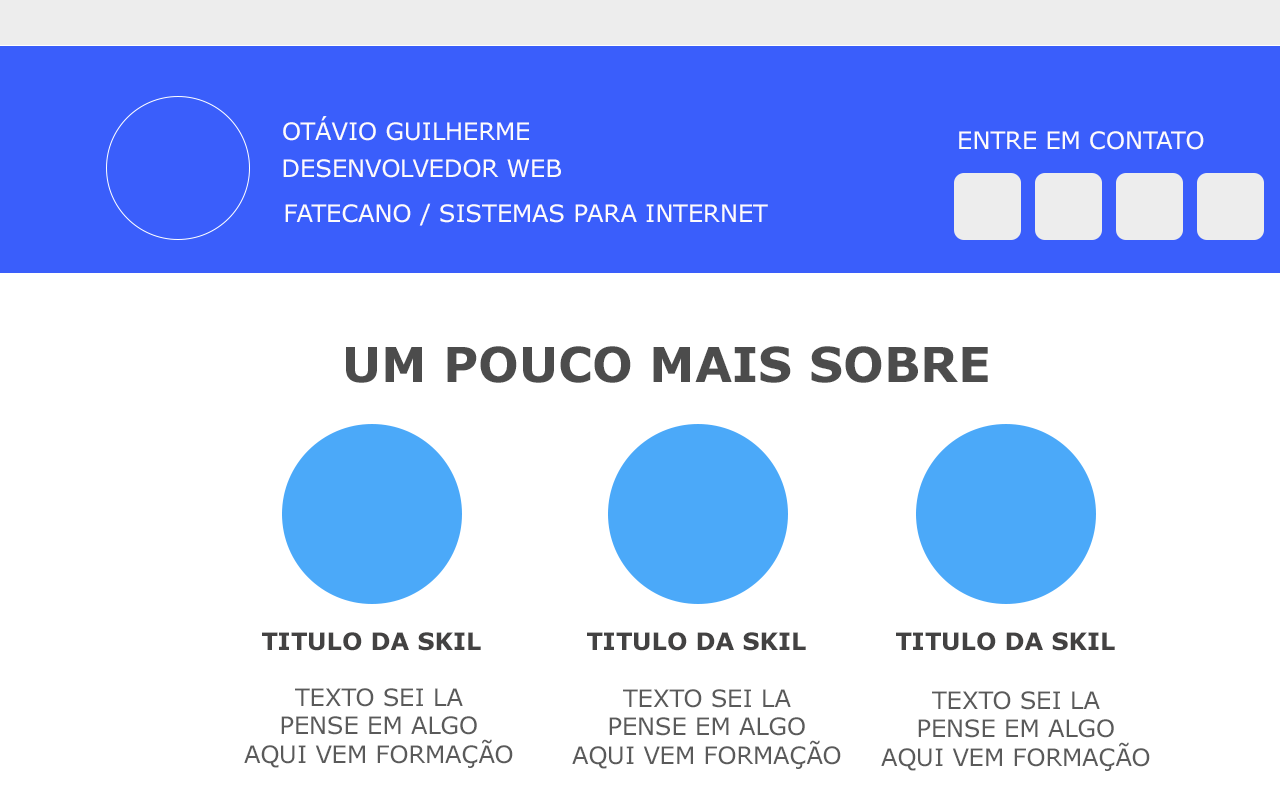
<style>
.page{position:relative;width:1280px;height:800px;background:#ffffff}
.page>*{position:absolute;margin:0}
.t1{font:24px "Verdana";color:#fdfbfb}
.t2{font:48px "Verdana-Bold";color:#4c4c4c}
.t3{font:24px "Verdana-Bold";color:#434242}
.t4{font:24px "Verdana";color:#5a5a5a}
</style>
<div class="page">
<p class="t1" style="left:283px;top:116px;width:246px;height:25px">OTÁVIO GUILHERME</p>
<p class="t1" style="left:959px;top:131px;width:245px;height:19px">ENTRE EM CONTATO</p>
<p class="t1" style="left:283px;top:159px;width:278px;height:19px">DESENVOLVEDOR WEB</p>
<p class="t1" style="left:285px;top:203px;width:483px;height:23px">FATECANO / SISTEMAS PARA INTERNET</p>
<p class="t2" style="left:346px;top:346px;width:642px;height:37px">UM POUCO MAIS SOBRE</p>
<p class="t3" style="left:262px;top:632px;width:219px;height:19px">TITULO DA SKIL</p>
<p class="t3" style="left:587px;top:632px;width:219px;height:19px">TITULO DA SKIL</p>
<p class="t3" style="left:896px;top:632px;width:219px;height:19px">TITULO DA SKIL</p>
<p class="t4" style="left:244px;top:688px;width:269px;height:80px;text-align:center">TEXTO SEI LA<br>PENSE EM ALGO<br>AQUI VEM FORMAÇÃO</p>
<p class="t4" style="left:572px;top:689px;width:269px;height:80px;text-align:center">TEXTO SEI LA<br>PENSE EM ALGO<br>AQUI VEM FORMAÇÃO</p>
<p class="t4" style="left:881px;top:691px;width:269px;height:80px;text-align:center">TEXTO SEI LA<br>PENSE EM ALGO<br>AQUI VEM FORMAÇÃO</p>
</div>
